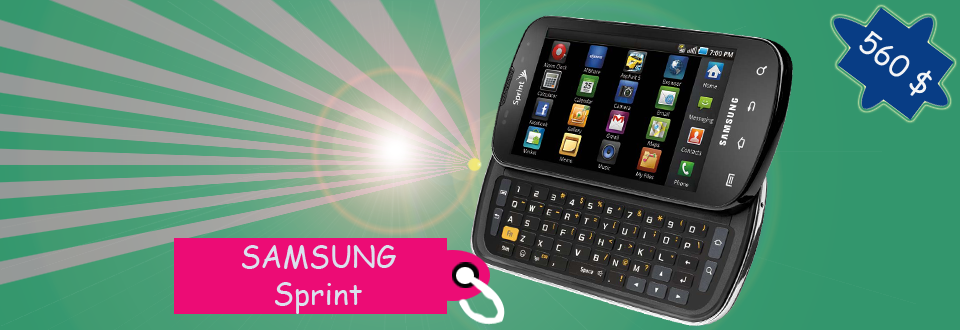
<style>
.page{position:relative;width:960px;height:330px}
.page>*{position:absolute;margin:0}
.t1{font:30px "ComicSansMS";color:#f4f5f6}
.t2{font:30px/37px "ComicSansMS";color:#dae1ed}
</style>
<div class="page">
<p class="t1" style="left:859px;top:31px;width:73px;height:65px;rotate:37deg">560 $</p>
<p class="t2" style="left:242px;top:245px;width:154px;height:69px;text-align:center">SAMSUNG<br>Sprint</p>
</div>
